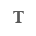
<style>
.page{position:relative;width:36px;height:36px;background:#ffffff}
.page>*{position:absolute;margin:0}
.t1{font:17.5px "Times-Bold";color:#5a5a5a}
</style>
<div class="page">
<p class="t1" style="left:13px;top:11px;width:11px;height:12px">T</p>
</div>
